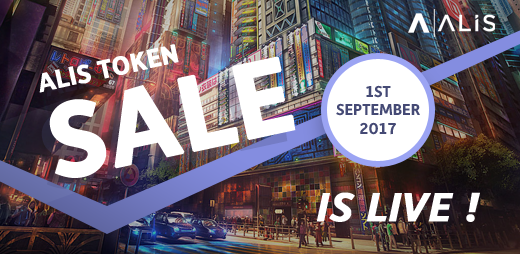
<style>
.page{position:relative;width:520px;height:254px}
.page>*{position:absolute;margin:0}
.t1{font:26px "Depot-Bold";color:#ffffff;text-transform:uppercase;font-weight:bold}
.t2{font:106px "Depot-Bold";color:#ffffff;text-transform:uppercase;font-weight:bold}
.t3{font:16px/18.3px "Depot-Bold";color:#454a75;text-transform:uppercase}
.t4{font:41px "Depot-BoldItalic";color:#ffffff;text-transform:uppercase;font-weight:bold}
</style>
<div class="page">
<p class="t1" style="left:39px;top:44px;width:140px;height:49px;rotate:-12deg">ALIS TOKEN</p>
<p class="t2" style="left:49px;top:56px;width:247px;height:122px;rotate:-12deg">SALE</p>
<p class="t3" style="left:336px;top:85px;width:84px;height:50px;text-align:center">1st<br>September<br>2017</p>
<p class="t4" style="left:316px;top:192px;width:164px;height:30px">is LIVE !</p>
</div>
